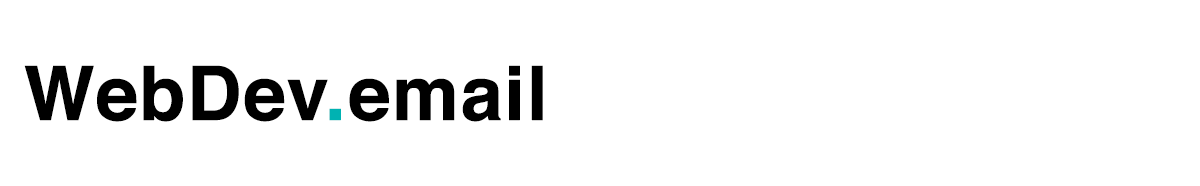
<style>
.page{position:relative;width:1200px;height:186px;background:#ffffff}
.page>*{position:absolute;margin:0}
.t1{font:75px "Helvetica-Bold";color:#000000;font-weight:bold}
.t2{font:75px "Helvetica-Bold";color:#00b2b2;font-weight:bold}
</style>
<div class="page">
<p class="t1" style="left:24px;top:65px;width:519px;height:57px">WebDev<span class="t2">.</span>email</p>
</div>
